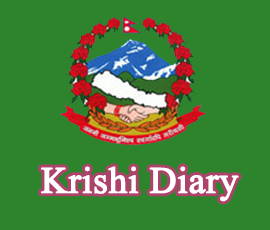
<style>
.page{position:relative;width:270px;height:230px;background:#2d842d}
.page>*{position:absolute;margin:0}
.t1{font:37px "TimesNewRomanPSMT";color:#ffffff;font-weight:bold}
</style>
<div class="page">
<p class="t1" style="left:41px;top:166px;width:198px;height:36px">Krishi Diary</p>
</div>
